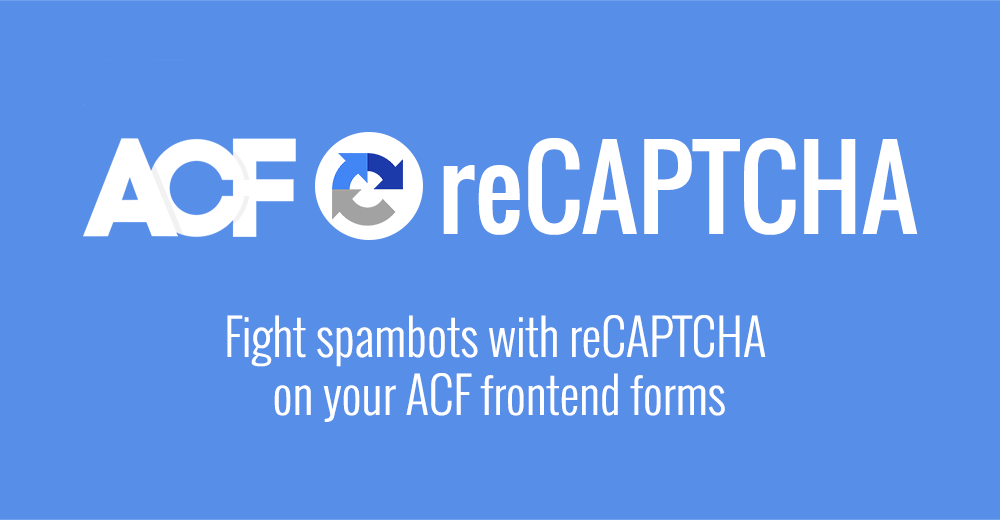
<style>
.page{position:relative;width:1000px;height:520px;background:#568ee8}
.page>*{position:absolute;margin:0}
.t1{font:108.3px "Oswald-Regular";color:#ffffff}
.t2{font:49.1px/58px "Oswald-Light";color:#ffffff}
</style>
<div class="page">
<p class="t1" style="left:443px;top:138px;width:475px;height:97px">reCAPTCHA</p>
<p class="t2" style="left:227px;top:315px;width:539px;height:107px;text-align:center">Fight spambots with reCAPTCHA <br>on your ACF frontend forms</p>
</div>
